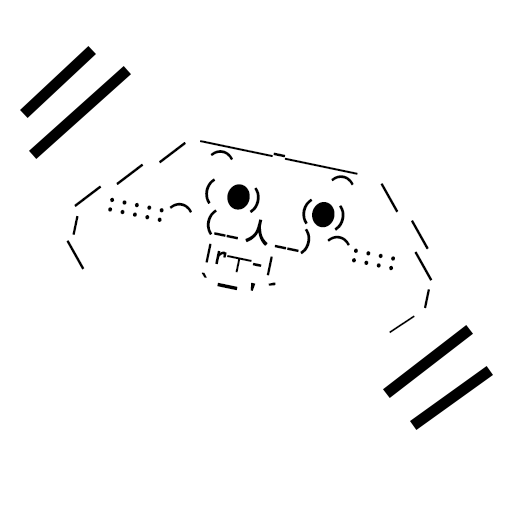
<style>
.page{position:relative;width:512px;height:512px;background:#ffffff}
.page>*{position:absolute;margin:0}
.t1{font:27.4px/30px "Osaka-Mono";color:#000000;font-weight:bold;scale:0.88 1}
.t2{font:24px "Osaka-Mono";color:#000000}
</style>
<div class="page">
<p class="t1" style="left:66px;top:140px;width:367px;height:194px;rotate:12deg">＿＿＿_＿＿＿ <br>　 　　　／　⌒　　　　⌒　＼ <br>　　　／　　（ ●） （●）　　＼ <br>　 ／:::::⌒（__人__）⌒:::: ＼ 　<br>　 |　　　　　|r┬-|　　　　　　| <br>　 ＼ 　　 　 `ー'´ 　 　<span class="t2"> 　／</span></p>
</div>
